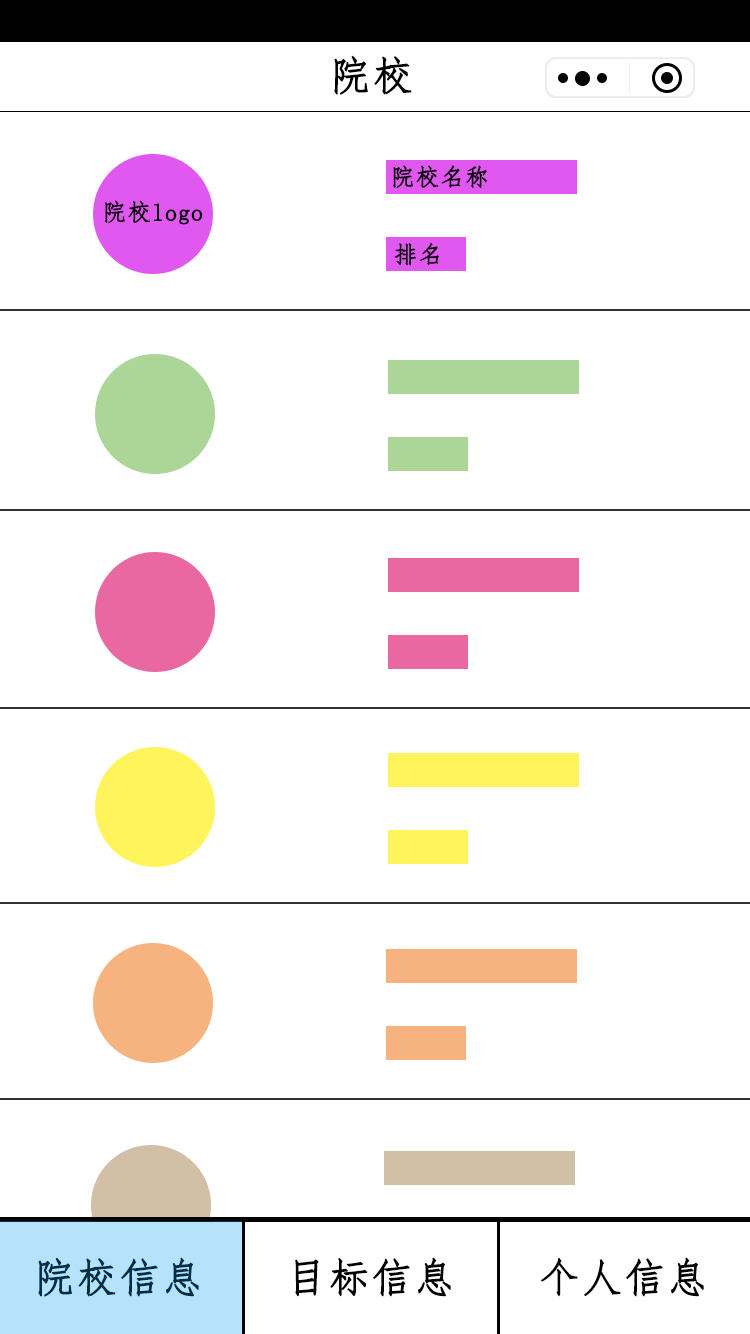
<style>
.page{position:relative;width:750px;height:1334px;background:#ffffff}
.page>*{position:absolute;margin:0}
.t1{font:40.7px "FangSong";letter-spacing:0.02em;color:#000000;font-weight:bold}
.t2{font:23.7px "FangSong";letter-spacing:0.02em;color:#000000;font-weight:bold}
.t3{font:40.7px "FangSong";letter-spacing:0.02em;color:#002e44;font-weight:bold}
</style>
<div class="page">
<p class="t1" style="left:334px;top:55px;width:78px;height:40px">院校</p>
<p class="t2" style="left:393px;top:165px;width:94px;height:23px">院校名称</p>
<p class="t2" style="left:105px;top:200px;width:98px;height:25px">院校logo</p>
<p class="t2" style="left:394px;top:242px;width:45px;height:24px">排名</p>
<p class="t3" style="left:38px;top:1257px;width:161px;height:40px">院校信息</p>
<p class="t1" style="left:295px;top:1257px;width:156px;height:40px">目标信息</p>
<p class="t1" style="left:541px;top:1257px;width:163px;height:40px">个人信息</p>
</div>
